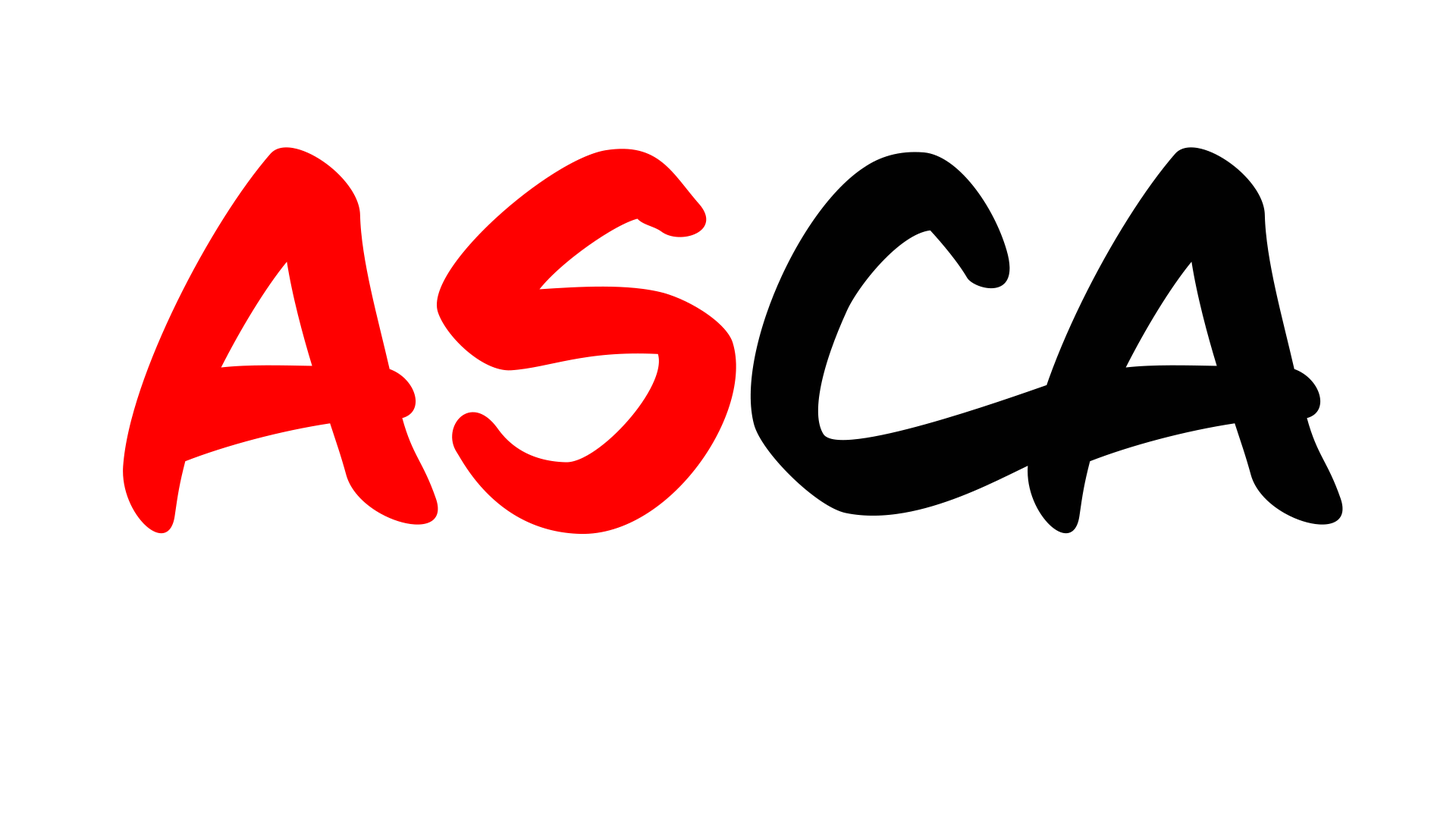
<style>
.page{position:relative;width:1456px;height:819px;background:#ffffff}
.page>*{position:absolute;margin:0}
.t1{font:526.6px "CCSignLanguage-Regular";color:#ff0000}
.t2{font:526.6px "CCSignLanguage-Regular";color:#010101}
</style>
<div class="page">
<p class="t1" style="left:123px;top:147px;width:1220px;height:388px">AS<span class="t2">CA</span></p>
</div>
